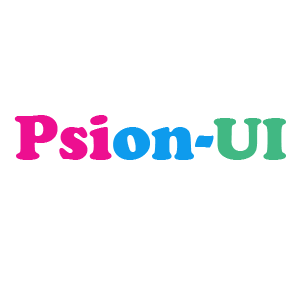
<style>
.page{position:relative;width:300px;height:300px;background:#ffffff}
.page>*{position:absolute;margin:0}
.t1{font:65px "CooperBlack";color:#ed0f90}
.t2{font:65px "CooperBlack";color:#0e9bed}
.t3{font:60px "CooperBlack";color:#41b883}
</style>
<div class="page">
<p class="t1" style="left:14px;top:115px;width:200px;height:45px">Psi<span class="t2">on-</span></p>
<p class="t3" style="left:213px;top:118px;width:73px;height:42px">UI</p>
</div>
